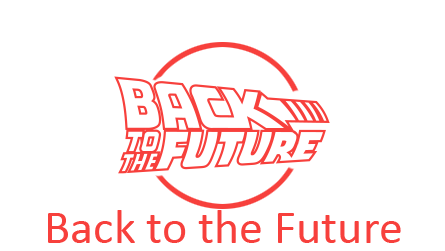
<style>
.page{position:relative;width:445px;height:251px;background:#ffffff}
.page>*{position:absolute;margin:0}
.t1{font:48px "Calibri";color:#f7403c}
</style>
<div class="page">
<p class="t1" style="left:48px;top:210px;width:353px;height:33px">Back to the Future</p>
</div>
